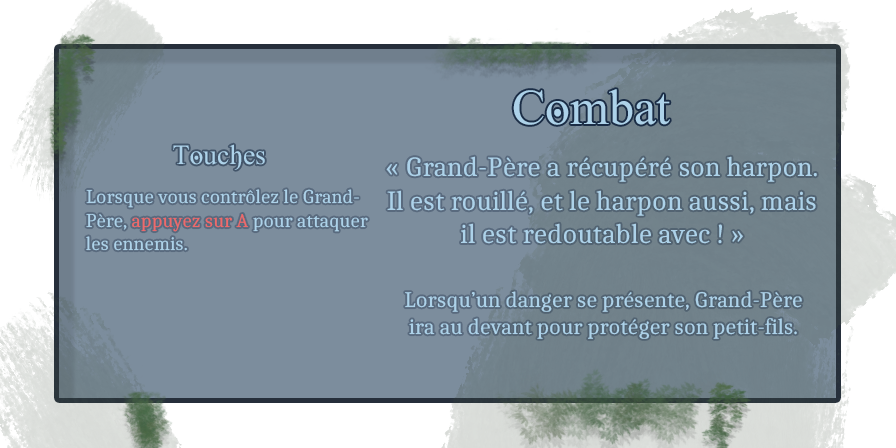
<style>
.page{position:relative;width:896px;height:448px;background:#7c8d9d}
.page>*{position:absolute;margin:0}
.t1{font:50px "GhostTheory";color:#add2e9}
.t2{font:27.8px "GhostTheory";color:#add2e9}
.t3{font:27.8px "Caladea-Regular";color:#add2e9}
.t4{font:19.4px "Caladea-Regular";color:#add2e9}
.t5{font:19.4px "Caladea-Regular";color:#ef6a6a}
.t6{font:22.2px "Caladea-Regular";color:#add2e9}
</style>
<div class="page">
<p class="t1" style="left:513px;top:89px;width:157px;height:36px">Combat</p>
<p class="t2" style="left:173px;top:144px;width:92px;height:26px">Touches :</p>
<p class="t3" style="left:386px;top:156px;width:431px;height:88px;text-align:center">« Grand-Père a récupéré son harpon. Il est rouillé, et le harpon aussi, mais il est redoutable avec ! »</p>
<p class="t4" style="left:86px;top:189px;width:282px;height:62px">Lorsque vous contrôlez le Grand-<br>Père, <span class="t5">appuyez sur A </span>pour attaquer<br>les ennemis.</p>
<p class="t6" style="left:405px;top:291px;width:397px;height:48px;text-align:center">Lorsqu’un danger se présente, Grand-Père <br>ira au devant pour protéger son petit-fils.</p>
</div>
